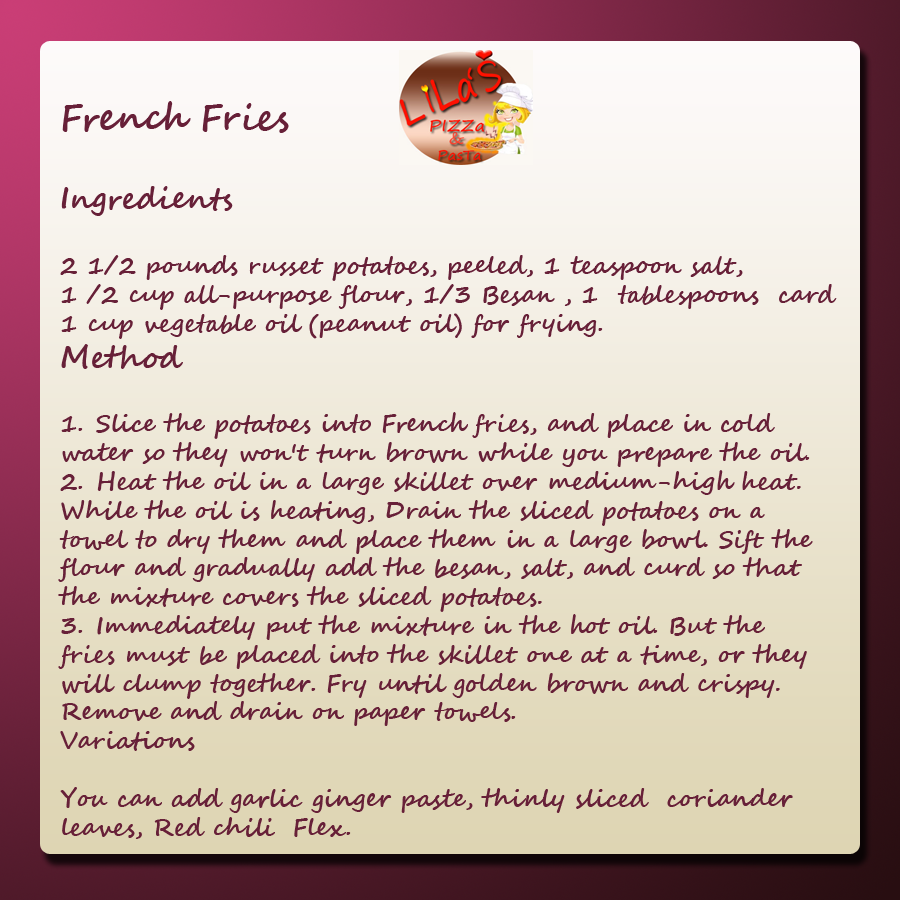
<style>
.page{position:relative;width:900px;height:900px}
.page>*{position:absolute;margin:0}
.t1{font:24px "SegoeScript-Bold";color:#672038}
.t2{font:36px "SegoeScript-Bold";color:#672038}
.t3{font:30px "SegoeScript-Bold";color:#672038}
</style>
<div class="page">
<p class="t1" style="left:58px;top:101px;width:779px;height:738px"><span class="t2">French Fries<br><br></span><span class="t3">Ingredients<br><br></span>2 1/2 pounds russet potatoes, peeled, 1 teaspoon salt, <br>1 /2 cup all-purpose flour, 1/3 Besan , 1  tablespoons  card <br>1 cup vegetable oil (peanut oil) for frying.<br><span class="t3">Method<br><br></span>1. Slice the potatoes into French fries, and place in cold <br>water so they won't turn brown while you prepare the oil.<br>2. Heat the oil in a large skillet over medium-high heat. <br>While the oil is heating, Drain the sliced potatoes on a <br>towel to dry them and place them in a large bowl. Sift the <br>flour and gradually add the besan, salt, and curd so that <br>the mixture covers the sliced potatoes. <br>3. Immediately put the mixture in the hot oil. But the <br>fries must be placed into the skillet one at a time, or they <br>will clump together. Fry until golden brown and crispy. <br>Remove and drain on paper towels.<br>Variations<br><br>You can add garlic ginger paste, thinly sliced  coriander <br>leaves, Red chili  Flex.</p>
</div>
